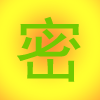
<style>
.page{position:relative;width:100px;height:100px}
.page>*{position:absolute;margin:0}
.t1{font:70px "SimHei";color:#72ca01}
</style>
<div class="page">
<p class="t1" style="left:17px;top:16px;width:64px;height:66px">密</p>
</div>
